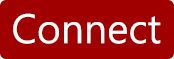
<style>
.page{position:relative;width:174px;height:59px;background:#a10000}
.page>*{position:absolute;margin:0}
.t1{font:38px "MicrosoftJhengHeiUIRegular";color:#ffffff}
</style>
<div class="page">
<p class="t1" style="left:13px;top:13px;width:148px;height:31px">Connect</p>
</div>
